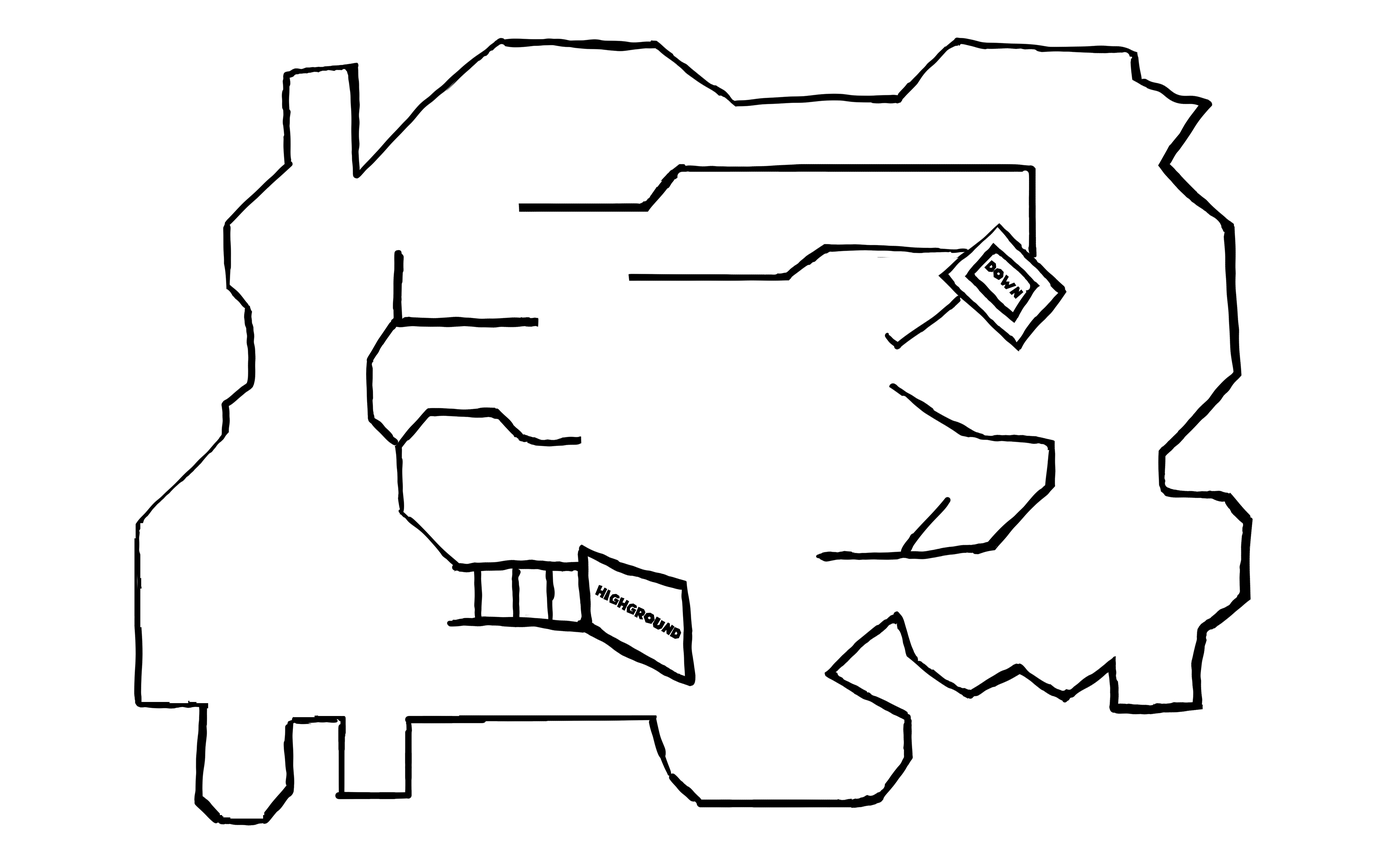
<style>
.page{position:relative;width:1381px;height:863px;background:#ffffff}
.page>*{position:absolute;margin:0}
.t1{font:14.6px "SuperMarioGalaxy";color:#000000}
</style>
<div class="page">
<p class="t1" style="left:984px;top:260px;width:40px;height:39px;rotate:45deg">Down</p>
<p class="t1" style="left:595px;top:585px;width:87px;height:54px;rotate:29deg">Highground</p>
</div>
